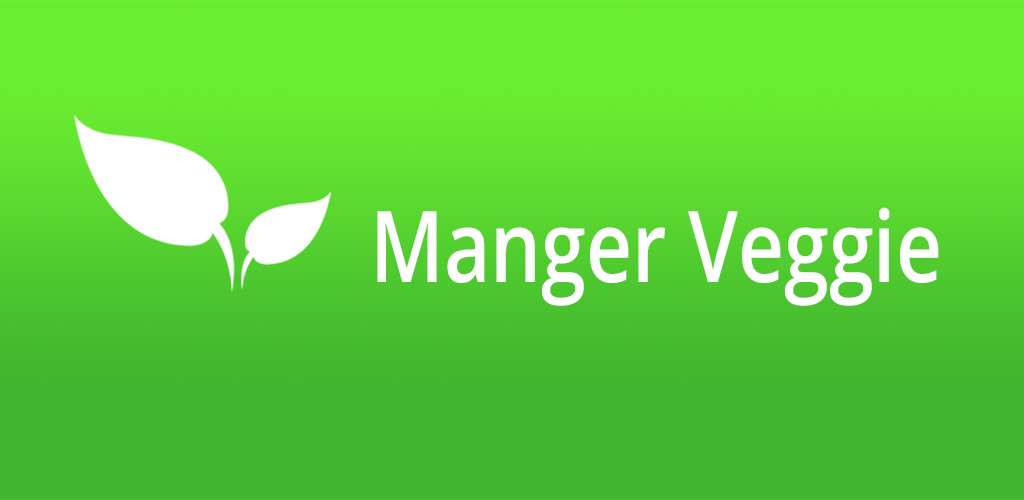
<style>
.page{position:relative;width:1024px;height:500px;background:#41b72f}
.page>*{position:absolute;margin:0}
.t1{font:99.3px "OpenSans-Semibold";color:#ffffff;scale:0.81 1}
</style>
<div class="page">
<p class="t1" style="left:377px;top:207px;width:562px;height:99px">Manger Veggie</p>
</div>
